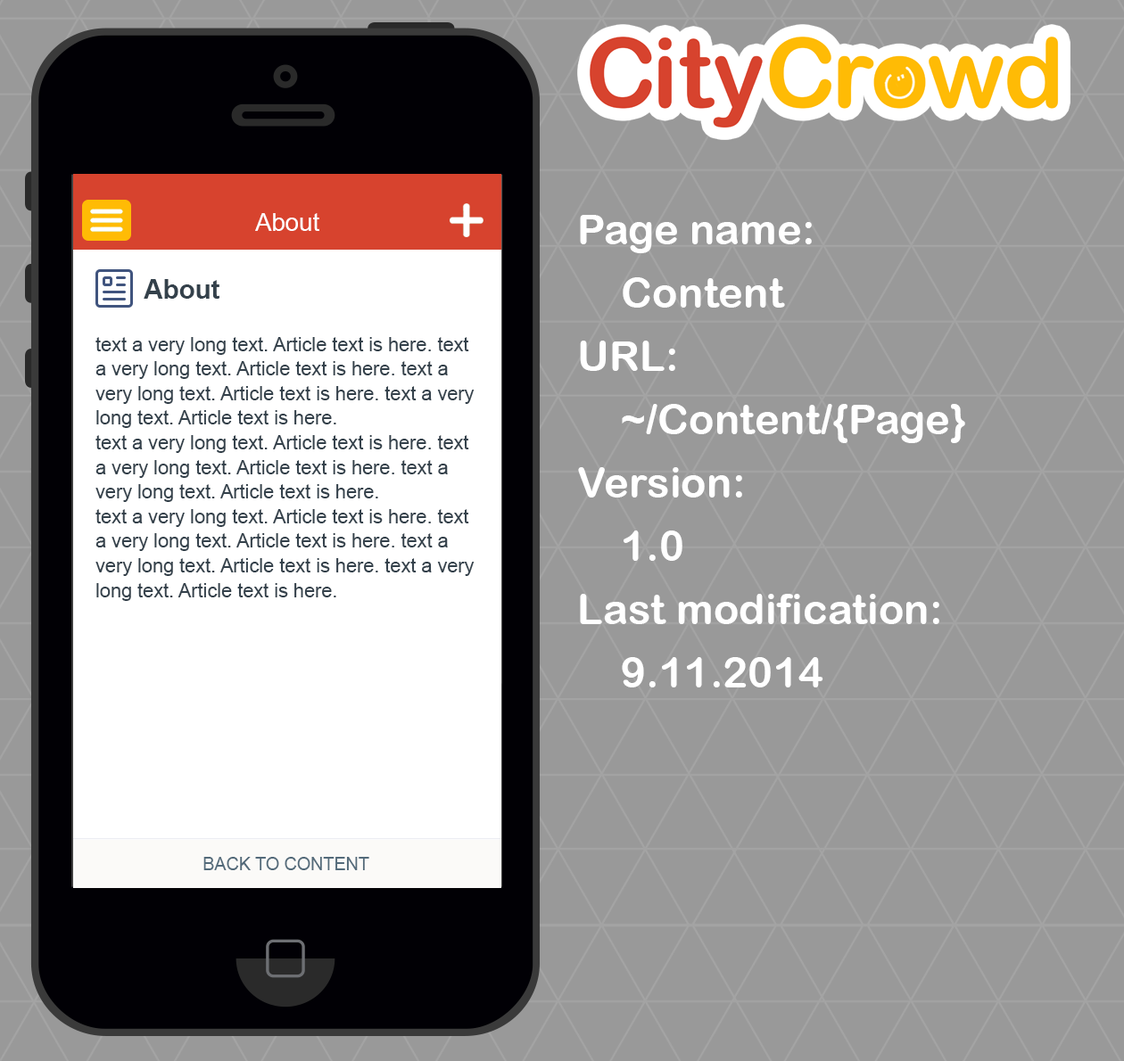
<style>
.page{position:relative;width:1124px;height:1061px;background:#999999}
.page>*{position:absolute;margin:0}
.t1{font:24.6px "ArialMT";color:#ffffff}
.t2{font:42.2px/63.3px "ArialRoundedMTBold";color:#ffffff}
.t3{font:26.4px "Arial-BoldMT";color:#34414b}
.t4{font:19.3px/24.6px "ArialMT";color:#34414b}
.t5{font:17.6px "ArialMT";color:#536a7a}
</style>
<div class="page">
<p class="t1" style="left:255px;top:213px;width:64px;height:18px">About</p>
<p class="t2" style="left:578px;top:215px;width:387px;height:473px">Page name:<br>Content<br>URL:<br>~/Content/{Page}<br>Version:<br>1.0<br>Last modification:<br>9.11.2014</p>
<p class="t3" style="left:144px;top:279px;width:76px;height:20px">About</p>
<p class="t4" style="left:95px;top:337px;width:379px;height:264px">text a very long text. Article text is here. text a very long text. Article text is here. text a very long text. Article text is here. text a very long text. Article text is here.<br>text a very long text. Article text is here. text a very long text. Article text is here. text a very long text. Article text is here.<br>text a very long text. Article text is here. text a very long text. Article text is here. text a very long text. Article text is here. text a very long text. Article text is here.</p>
<p class="t5" style="left:203px;top:857px;width:166px;height:13px">BACK TO CONTENT</p>
</div>
